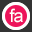
<style>
.page{position:relative;width:32px;height:32px;background:#333333}
.page>*{position:absolute;margin:0}
.t1{font:18px "ArialMT";letter-spacing:0.2em;color:#ffffff}
</style>
<div class="page">
<p class="t1" style="left:9px;top:8px;width:14px;height:15px">fa</p>
</div>
